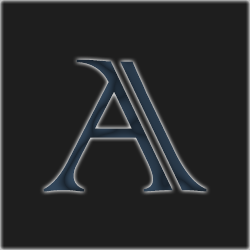
<style>
.page{position:relative;width:250px;height:250px;background:#1e1e1e}
.page>*{position:absolute;margin:0}
.t1{font:250px "ColonnaMT";color:#263645}
</style>
<div class="page">
<p class="t1" style="left:43px;top:59px;width:164px;height:133px">A</p>
</div>
